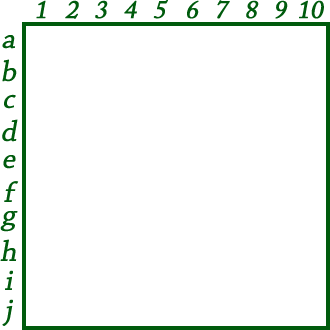
<style>
.page{position:relative;width:330px;height:330px;background:#ffffff}
.page>*{position:absolute;margin:0}
.t1{font:25px "ACaslonPro-Regular";color:#005b0d;font-weight:bold;font-style:italic}
.t2{font:30px "ChaparralPro-Regular";color:#005b0d;font-weight:bold;font-style:italic}
</style>
<div class="page">
<p class="t1" style="left:36px;top:0px;width:10px;height:19px">1</p>
<p class="t1" style="left:65px;top:0px;width:14px;height:19px">2</p>
<p class="t1" style="left:95px;top:0px;width:13px;height:19px">3</p>
<p class="t1" style="left:124px;top:0px;width:13px;height:19px">4</p>
<p class="t1" style="left:153px;top:0px;width:15px;height:19px">5</p>
<p class="t1" style="left:187px;top:0px;width:12px;height:19px">6</p>
<p class="t1" style="left:217px;top:0px;width:13px;height:19px">7</p>
<p class="t1" style="left:246px;top:0px;width:13px;height:19px">8</p>
<p class="t1" style="left:275px;top:0px;width:13px;height:19px">9</p>
<p class="t1" style="left:299px;top:0px;width:25px;height:19px">10</p>
<p class="t2" style="left:2px;top:35px;width:13px;height:14px">a</p>
<p class="t2" style="left:2px;top:59px;width:15px;height:23px">b</p>
<p class="t2" style="left:4px;top:94px;width:12px;height:15px">c</p>
<p class="t2" style="left:2px;top:119px;width:16px;height:23px">d</p>
<p class="t2" style="left:3px;top:155px;width:13px;height:14px">e</p>
<p class="t2" style="left:4px;top:181px;width:15px;height:21px">f</p>
<p class="t2" style="left:0px;top:211px;width:18px;height:21px">g</p>
<p class="t2" style="left:0px;top:239px;width:17px;height:22px">h</p>
<p class="t2" style="left:5px;top:270px;width:8px;height:20px">i</p>
<p class="t2" style="left:2px;top:299px;width:11px;height:27px">j</p>
</div>
